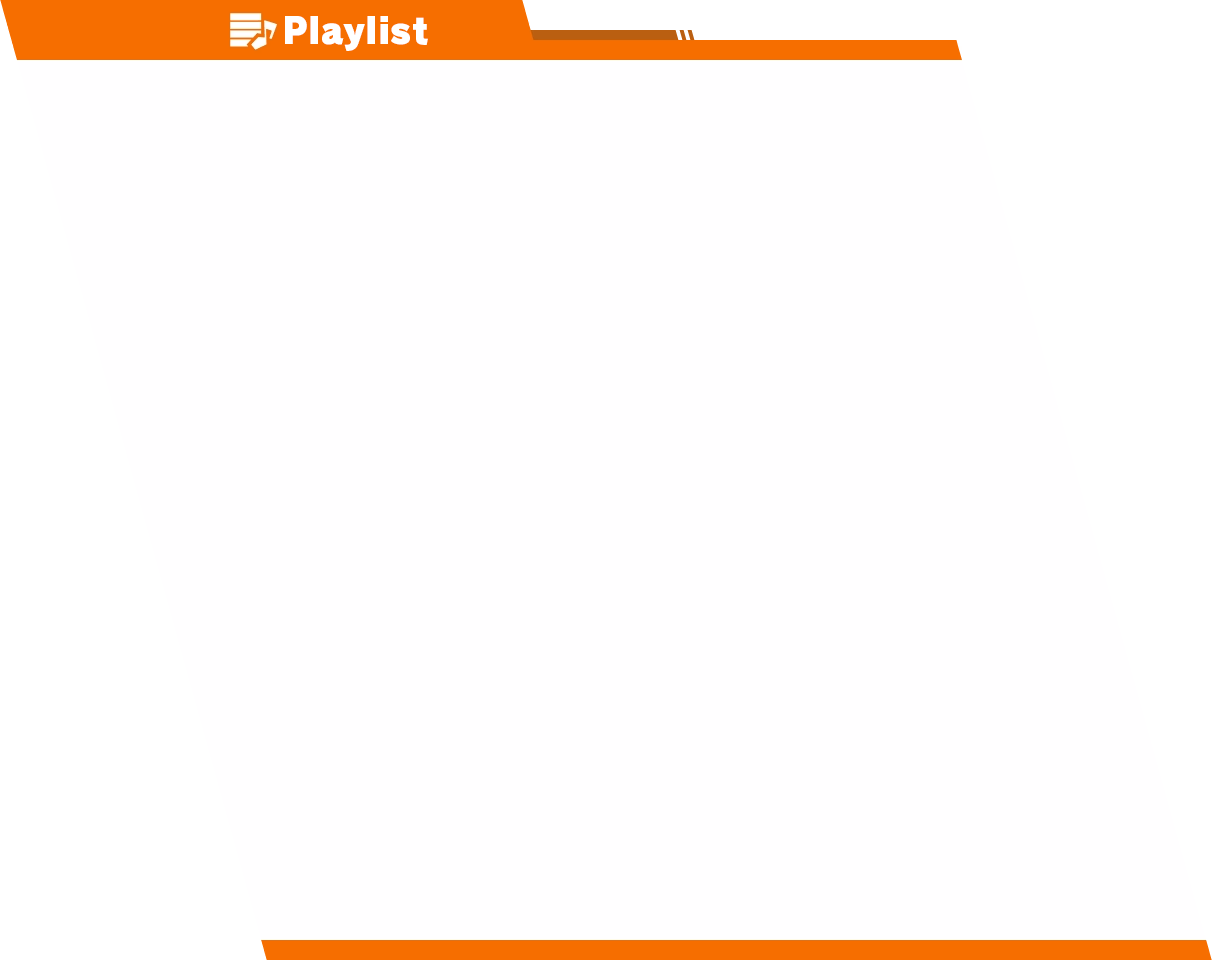
<style>
.page{position:relative;width:1212px;height:960px;background:#fffeff}
.page>*{position:absolute;margin:0}
.t1{font:36px "RodinPro-UB";letter-spacing:-0.002em;color:#ffffff}
</style>
<div class="page">
<p class="t1" style="left:285px;top:16px;width:143px;height:35px">Playlist</p>
</div>
